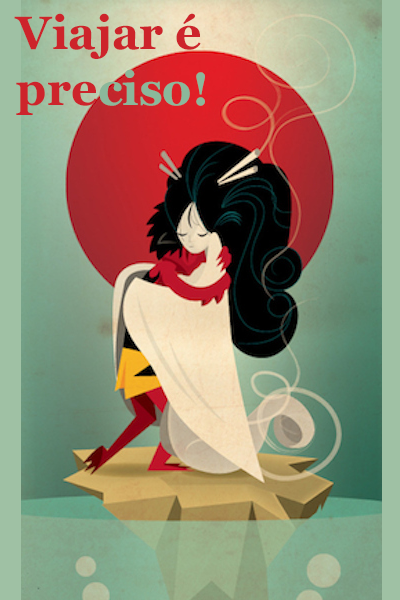
<style>
.page{position:relative;width:400px;height:600px}
.page>*{position:absolute;margin:0}
.t1{font:46.6px "Vani-Bold";color:#cd242b}
.t2{font:46.6px "Vani-Bold";color:#8bb89b}
</style>
<div class="page">
<p class="t1" style="left:14px;top:13px;width:191px;height:102px">Viajar é <br>pre<span class="t2">ciso!</span></p>
</div>
